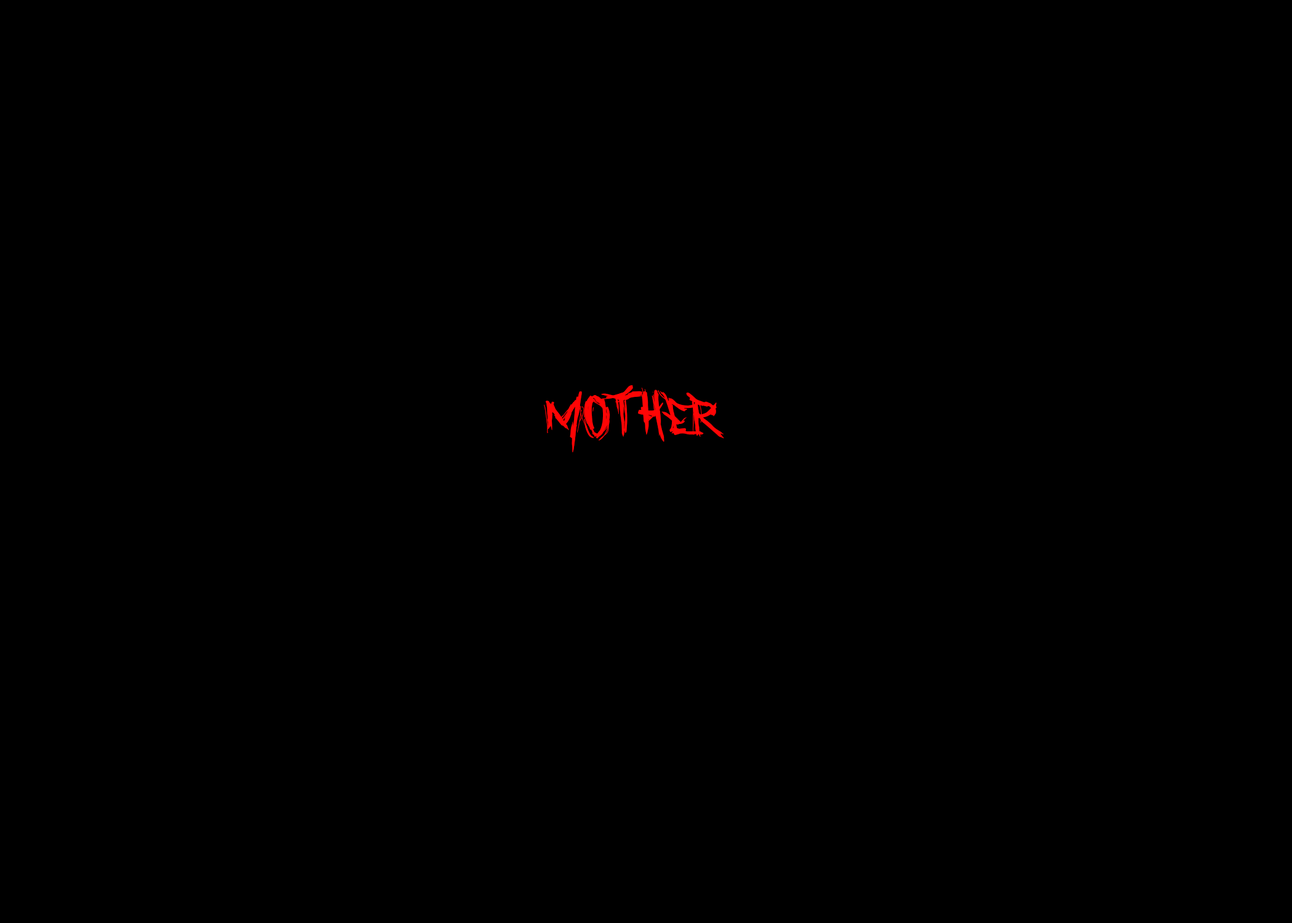
<style>
.page{position:relative;width:1292px;height:923px;background:#000000}
.page>*{position:absolute;margin:0}
.t1{font:76.9px "WhoasksSatan";color:#ff0505}
</style>
<div class="page">
<p class="t1" style="left:544px;top:385px;width:180px;height:67px">MoTHer</p>
</div>
